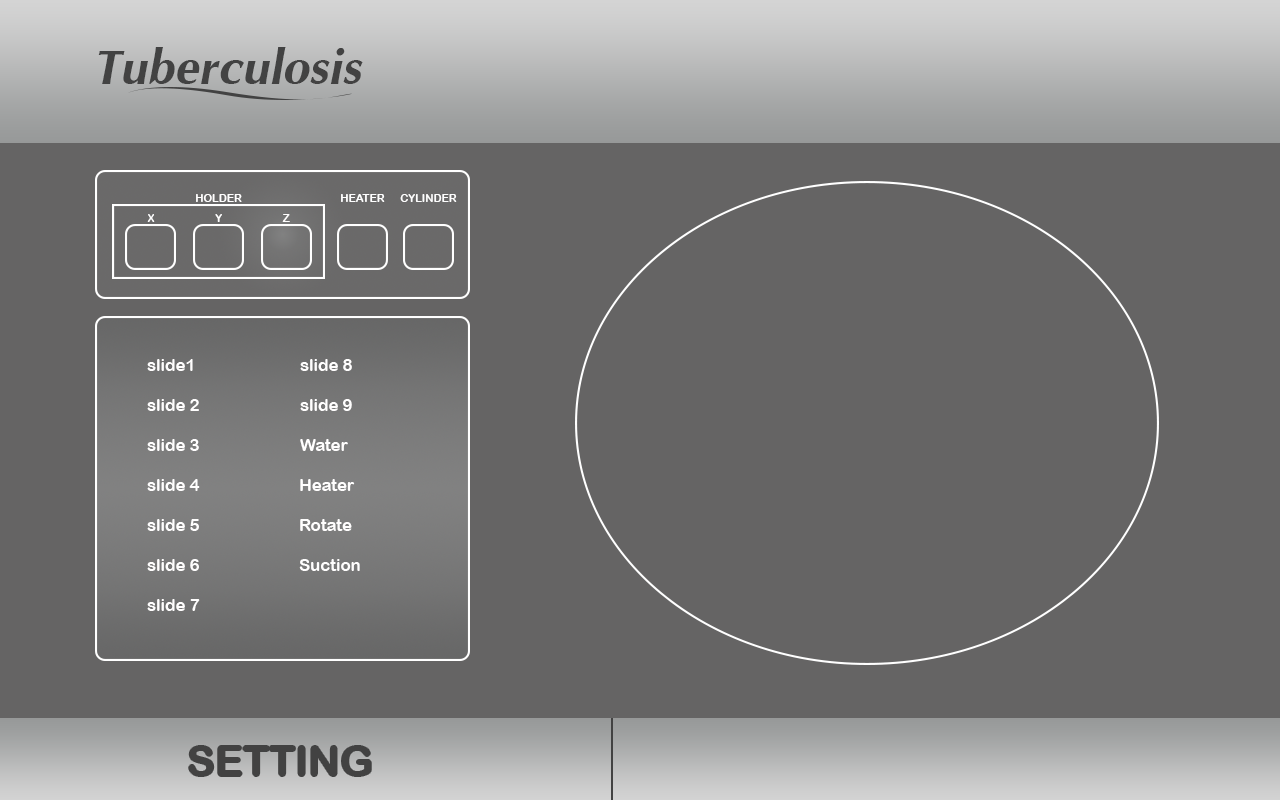
<style>
.page{position:relative;width:1280px;height:800px;background:#656464}
.page>*{position:absolute;margin:0}
.t1{font:75px "IrisUPCBoldItalic";color:#424242}
.t2{font:10.9px "ArialRoundedMTBold";color:#fffefe}
.t3{font:10.9px "ArialRoundedMTBold";color:#ffffff}
.t4{font:10.9px "ArialRoundedMTBold";color:#fdfdfd}
.t5{font:10.9px "ArialRoundedMTBold";color:#fefdfd}
.t6{font:16.7px "ArialRoundedMTBold";color:#fffefe}
.t7{font:41.7px "ArialRoundedMTBold";color:#424242}
</style>
<div class="page">
<p class="t1" style="left:98px;top:47px;width:265px;height:37px">Tuberculosis</p>
<p class="t2" style="left:196px;top:194px;width:46px;height:8px">HOLDER</p>
<p class="t3" style="left:341px;top:194px;width:44px;height:8px">HEATER</p>
<p class="t4" style="left:400px;top:194px;width:57px;height:8px">CYLINDER</p>
<p class="t4" style="left:147px;top:214px;width:8px;height:8px">X</p>
<p class="t3" style="left:215px;top:214px;width:7px;height:8px">Y</p>
<p class="t5" style="left:282px;top:214px;width:8px;height:8px">Z</p>
<p class="t6" style="left:147px;top:359px;width:46px;height:12px">slide1</p>
<p class="t6" style="left:300px;top:359px;width:52px;height:12px">slide 8</p>
<p class="t6" style="left:147px;top:399px;width:52px;height:12px">slide 2</p>
<p class="t6" style="left:300px;top:399px;width:52px;height:12px">slide 9</p>
<p class="t6" style="left:147px;top:439px;width:52px;height:12px">slide 3</p>
<p class="t6" style="left:300px;top:439px;width:48px;height:12px">Water</p>
<p class="t6" style="left:147px;top:479px;width:53px;height:12px">slide 4</p>
<p class="t6" style="left:300px;top:479px;width:55px;height:12px">Heater</p>
<p class="t6" style="left:147px;top:519px;width:52px;height:12px">slide 5</p>
<p class="t6" style="left:300px;top:519px;width:52px;height:12px">Rotate</p>
<p class="t6" style="left:147px;top:559px;width:52px;height:12px">slide 6</p>
<p class="t6" style="left:299px;top:559px;width:61px;height:12px">Suction</p>
<p class="t6" style="left:147px;top:599px;width:53px;height:12px">slide 7</p>
<p class="t7" style="left:189px;top:746px;width:182px;height:30px">SETTING</p>
</div>
